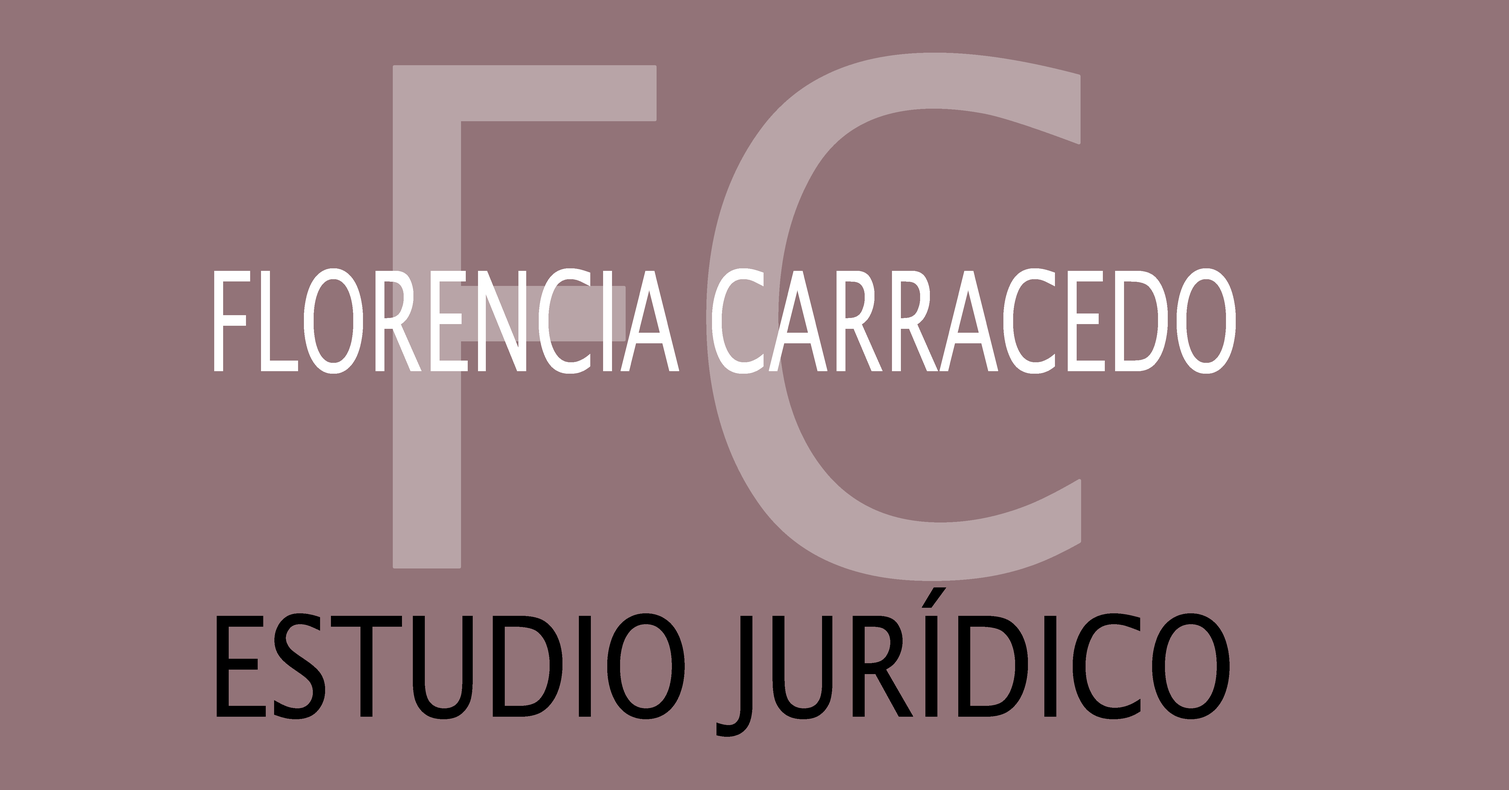
<style>
.page{position:relative;width:1509px;height:790px;background:#927378}
.page>*{position:absolute;margin:0}
.t1{font:692.1px "LucidaSans";color:#b8a4a7;scale:0.92 1}
.t2{font:138.8px "LucidaSans";color:#ffffff;scale:0.63 1}
.t3{font:139.2px "LucidaSans";color:#000000;scale:0.82 1}
</style>
<div class="page">
<p class="t1" style="left:394px;top:54px;width:686px;height:526px">FC</p>
<p class="t2" style="left:214px;top:268px;width:1022px;height:106px">FLORENCIA CARRACEDO</p>
<p class="t3" style="left:217px;top:587px;width:1013px;height:150px">ESTUDIO JURÍDICO</p>
</div>
